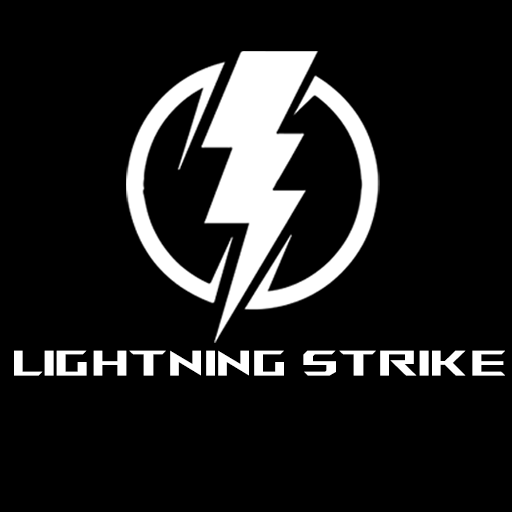
<style>
.page{position:relative;width:512px;height:512px;background:#000000}
.page>*{position:absolute;margin:0}
.t1{font:35.4px "AniMeMatrix-MB_EN";color:#ffffff;scale:1.18 1}
</style>
<div class="page">
<p class="t1" style="left:14px;top:350px;width:491px;height:26px">LIGHTNING STRIKE</p>
</div>
